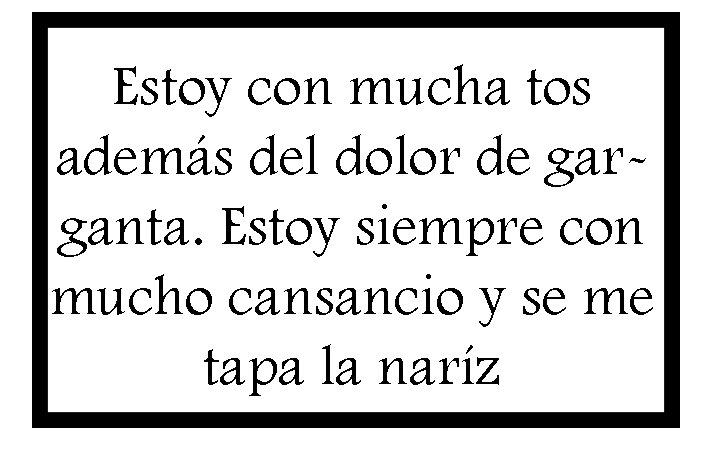
<style>
.page{position:relative;width:718px;height:454px;background:#ffffff}
.page>*{position:absolute;margin:0}
.t1{font:58.2px "FootlightMTLight";color:#000000}
</style>
<div class="page">
<p class="t1" style="left:52px;top:64px;width:601px;height:332px;text-align:center">Estoy con mucha tos además del dolor de garganta. Estoy siempre con mucho cansancio y se me tapa la naríz</p>
</div>
